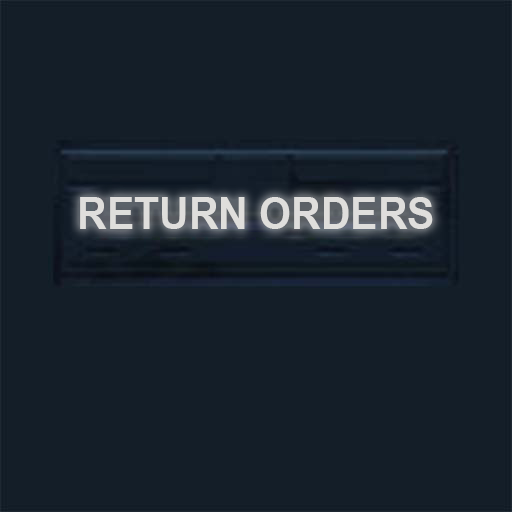
<style>
.page{position:relative;width:512px;height:512px;background:#141e28}
.page>*{position:absolute;margin:0}
.t1{font:45px "ArialNarrow-Bold";color:#dfdedc;font-variant:small-caps;scale:1.11 1}
</style>
<div class="page">
<p class="t1" style="left:80px;top:197px;width:353px;height:32px">RETURN ORDERS</p>
</div>
